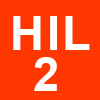
<style>
.page{position:relative;width:100px;height:100px;background:#ff3700}
.page>*{position:absolute;margin:0}
.t1{font:46.9px "Arial-BoldMT";letter-spacing:0.05em;color:#ffffff}
</style>
<div class="page">
<p class="t1" style="left:13px;top:16px;width:77px;height:34px">HIL</p>
<p class="t1" style="left:34px;top:57px;width:23px;height:34px">2</p>
</div>
